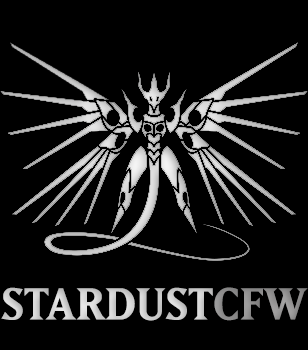
<style>
.page{position:relative;width:308px;height:350px;background:#000000}
.page>*{position:absolute;margin:0}
.t1{font:44px "MatrixIIOT-Bold";letter-spacing:0.02em}
</style>
<div class="page">
<p class="t1" style="left:1px;top:287px;width:307px;height:34px">STARDUSTCFW</p>
</div>
